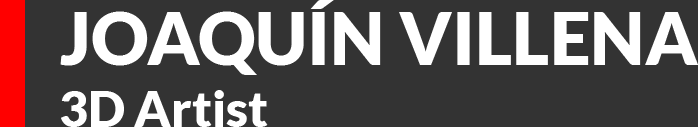
<style>
.page{position:relative;width:698px;height:127px;background:#333333}
.page>*{position:absolute;margin:0}
.t1{font:72px "Lato-Black";color:#ffffff}
.t2{font:50px "Lato-Black";color:#ffffff}
</style>
<div class="page">
<p class="t1" style="left:60px;top:0px;width:638px;height:75px">JOAQUÍN VILLENA</p>
<p class="t2" style="left:61px;top:90px;width:207px;height:37px">3D Artist</p>
</div>
